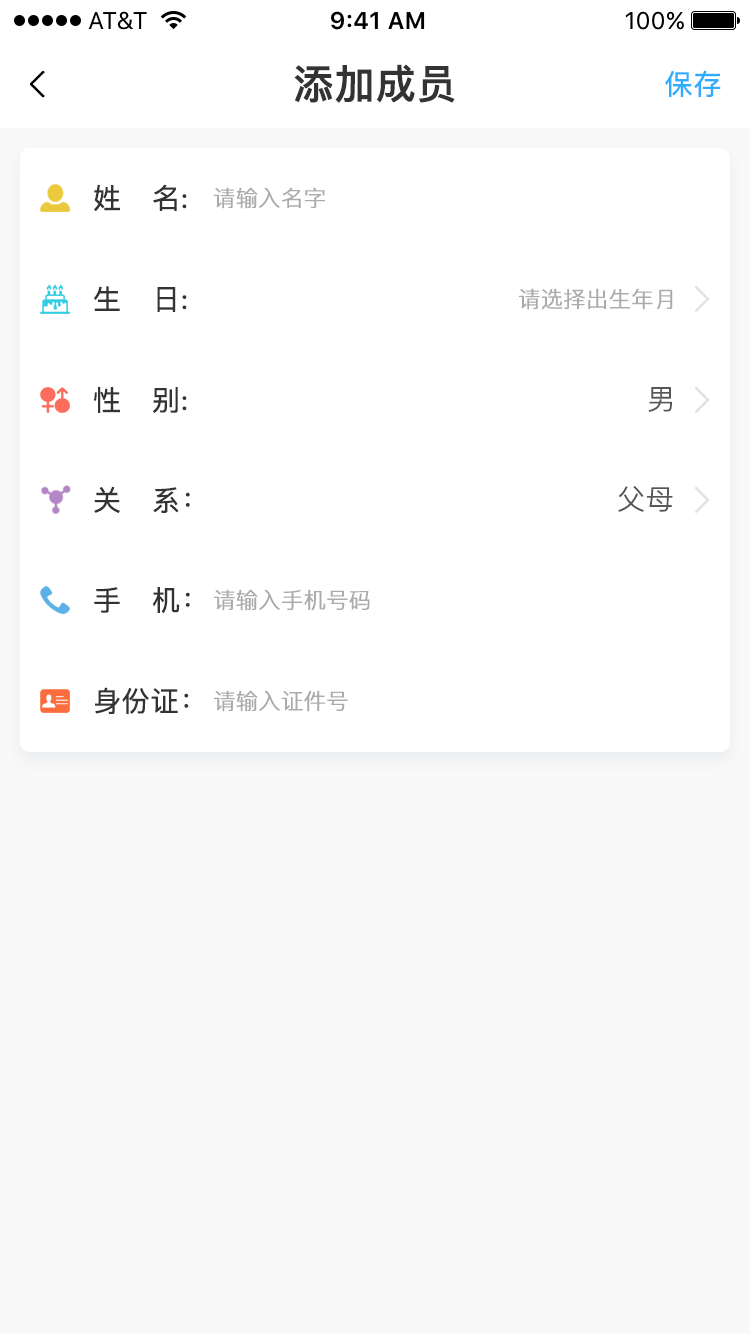
<style>
.page{position:relative;width:750px;height:1334px;background:#ffffff}
.page>*{position:absolute;margin:0}
.t1{font:40px "PingFangSC-Medium";color:#333333;font-weight:bold}
.t2{font:28px "PingFangSC-Regular";color:#30acff;font-weight:bold}
.t3{font:28px "PingFangSC-Regular";color:#333333;font-weight:bold}
.t4{font:22px "PingFangSC-Light";color:#ababab;font-weight:bold}
.t5{font:28px "PingFangSC-Light";color:#575757;font-weight:bold}
</style>
<div class="page">
<p class="t1" style="left:294px;top:64px;width:161px;height:39px">添加成员</p>
<p class="t2" style="left:665px;top:70px;width:56px;height:27px">保存</p>
<p class="t3" style="left:94px;top:184px;width:93px;height:27px">姓   名:</p>
<p class="t4" style="left:213px;top:187px;width:112px;height:22px">请输入名字</p>
<p class="t3" style="left:94px;top:286px;width:93px;height:26px">生   日:</p>
<p class="t4" style="left:518px;top:288px;width:155px;height:22px">请选择出生年月</p>
<p class="t3" style="left:93px;top:387px;width:94px;height:26px">性   别:</p>
<p class="t5" style="left:648px;top:387px;width:24px;height:25px">男</p>
<p class="t3" style="left:94px;top:486px;width:96px;height:27px">关   系：</p>
<p class="t5" style="left:618px;top:486px;width:55px;height:26px">父母</p>
<p class="t3" style="left:94px;top:587px;width:96px;height:26px">手   机：</p>
<p class="t4" style="left:214px;top:589px;width:156px;height:22px">请输入手机号码</p>
<p class="t3" style="left:95px;top:687px;width:94px;height:27px">身份证：</p>
<p class="t4" style="left:214px;top:690px;width:134px;height:22px">请输入证件号</p>
</div>
